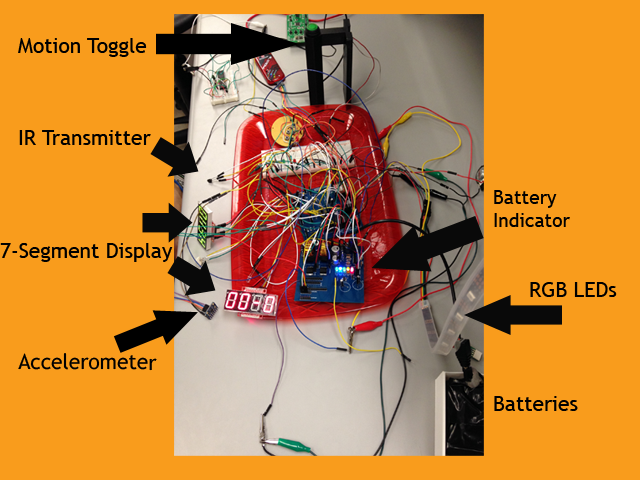
<style>
.page{position:relative;width:640px;height:480px;background:#f99c1c}
.page>*{position:absolute;margin:0}
.t1{font:21.2px "TrebuchetMS";color:#000000}
.t2{font:19.2px "TrebuchetMS";color:#000000}
</style>
<div class="page">
<p class="t1" style="left:18px;top:38px;width:129px;height:19px">Motion Toggle</p>
<p class="t1" style="left:19px;top:130px;width:132px;height:15px">IR Transmitter</p>
<p class="t2" style="left:494px;top:190px;width:76px;height:37px">Battery <br>Indicator</p>
<p class="t1" style="left:0px;top:243px;width:173px;height:19px">7-Segment Display</p>
<p class="t1" style="left:530px;top:282px;width:87px;height:15px">RGB LEDs</p>
<p class="t1" style="left:18px;top:353px;width:139px;height:18px">Accelerometer</p>
<p class="t1" style="left:494px;top:396px;width:84px;height:15px">Batteries</p>
</div>
